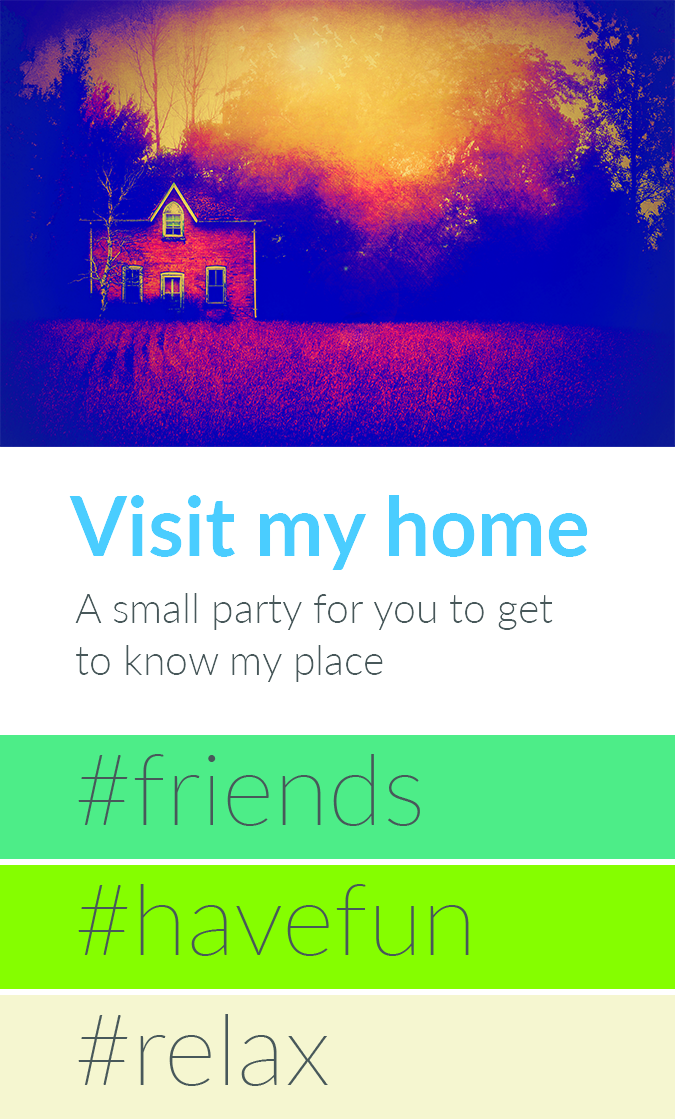
<style>
.page{position:relative;width:675px;height:1119px;background:#ffffff}
.page>*{position:absolute;margin:0}
.t1{font:82px "Lato-Bold";color:#4acdff}
.t2{font:41px/52px "Lato-Light";color:#48585a}
</style>
<div class="page">
<p class="t1" style="left:69px;top:495px;width:519px;height:75px">Visit my home</p>
<p class="t2" style="left:75px;top:593px;width:478px;height:89px;text-align:right">A small party for you to get to know my place</p>
</div>
